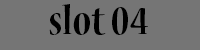
<style>
.page{position:relative;width:200px;height:50px;background:#757575}
.page>*{position:absolute;margin:0}
.t1{font:44px "NuevaStd-BoldCond";color:#000000}
</style>
<div class="page">
<p class="t1" style="left:49px;top:4px;width:99px;height:31px">slot 04</p>
</div>
